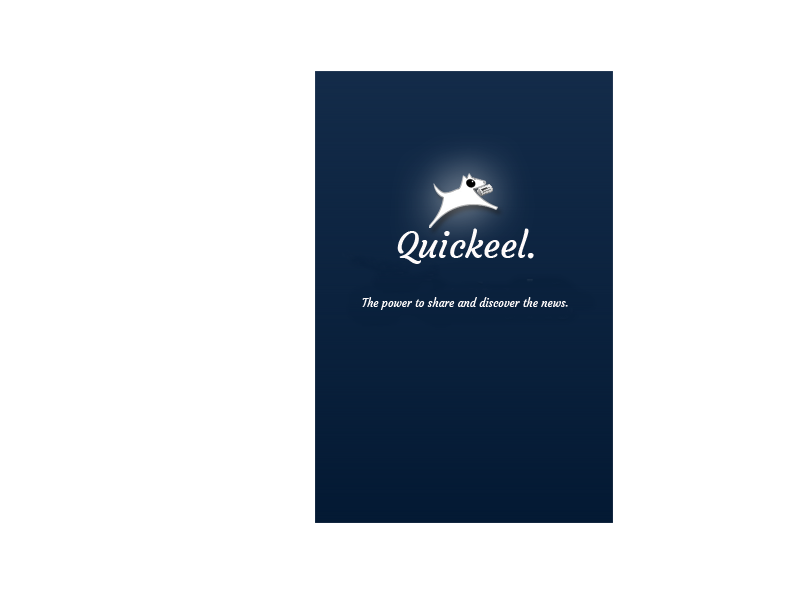
<style>
.page{position:relative;width:800px;height:600px;background:#ffffff}
.page>*{position:absolute;margin:0}
.t1{font:11px "Courgette-Regular";color:#fefbfb}
</style>
<div class="page">
<p class="t1" style="left:362px;top:297px;width:206px;height:13px">The power to share and discover the news.</p>
</div>
